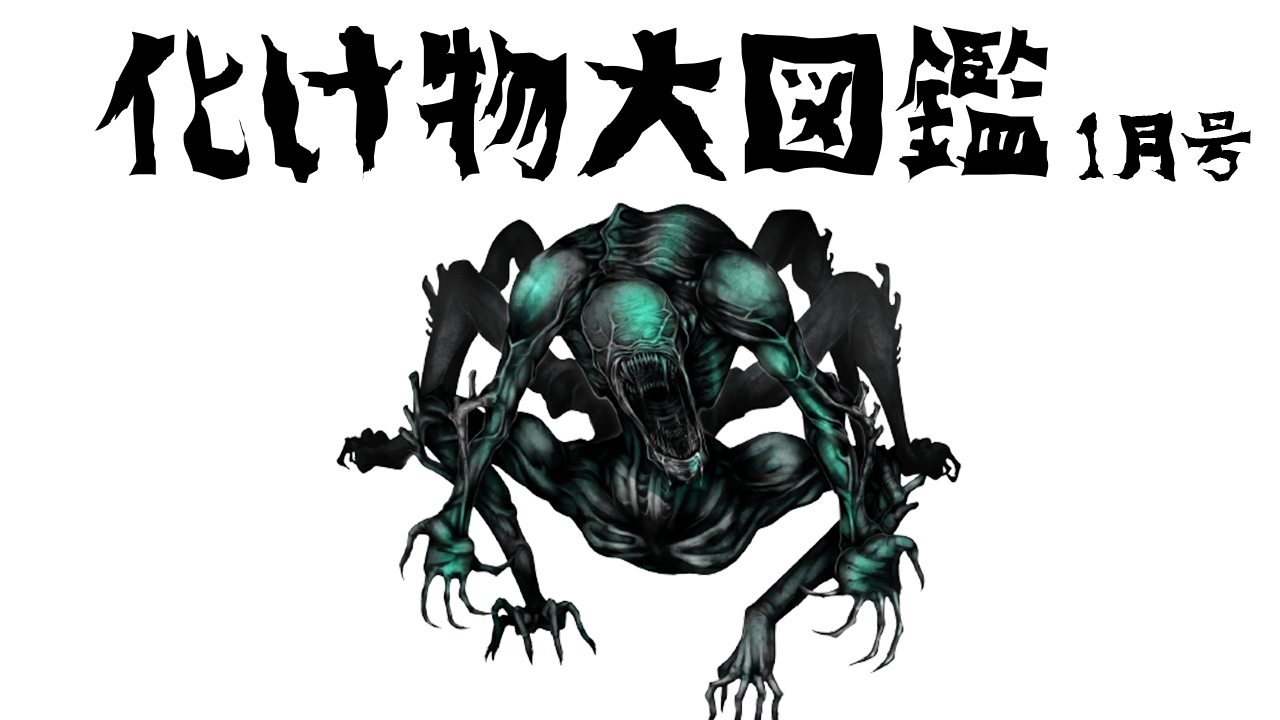
<style>
.page{position:relative;width:1280px;height:720px;background:#ffffff}
.page>*{position:absolute;margin:0}
.t1{font:160px "hakidame";color:#000000}
.t2{font:72px "hakidame";color:#000000}
</style>
<div class="page">
<p class="t1" style="left:94px;top:25px;width:955px;height:158px">化け物大図鑑</p>
<p class="t2" style="left:1076px;top:110px;width:175px;height:72px">1月号</p>
</div>
